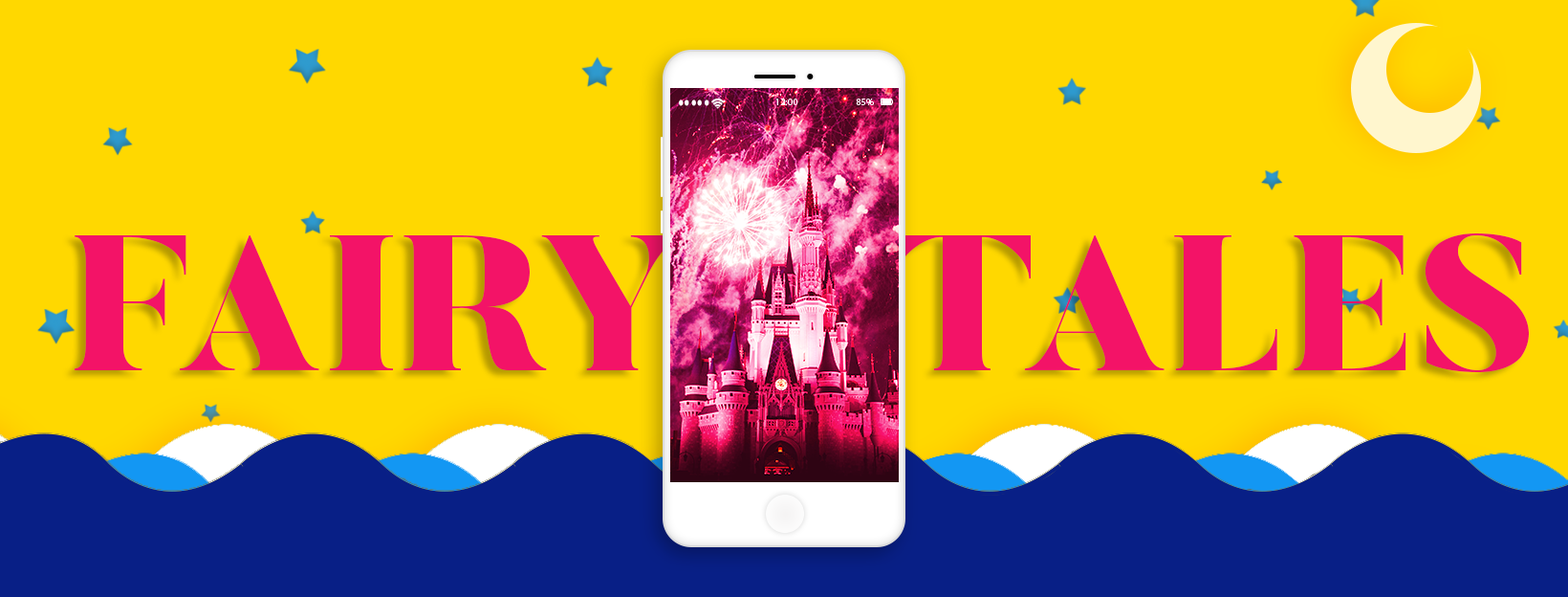
<style>
.page{position:relative;width:1568px;height:597px;background:#ffd800}
.page>*{position:absolute;margin:0}
.t1{font:191.2px "Butler-Black";color:#f31367;text-transform:uppercase}
</style>
<div class="page">
<p class="t1" style="left:75px;top:233px;width:1454px;height:139px">Fairy    Tales</p>
</div>
